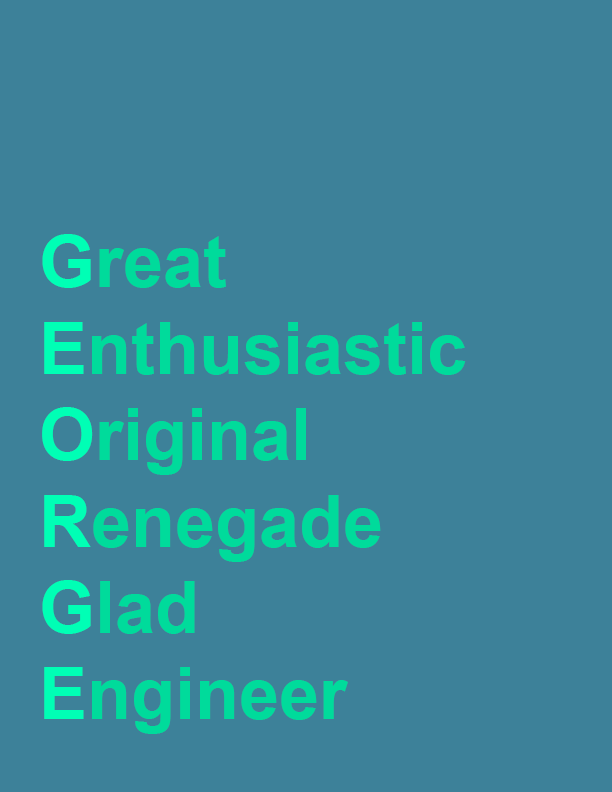
<style>
.page{position:relative;width:612px;height:792px;background:#3d8199}
.page>*{position:absolute;margin:0}
.t1{font:72px "Arial-BoldMT";color:#00db9b}
.t2{font:72px "Arial-BoldMT";color:#00ffb5}
</style>
<div class="page">
<p class="t1" style="left:42px;top:234px;width:424px;height:500px"><span class="t2">G</span>reat<br><span class="t2">E</span>nthusiastic<br><span class="t2">O</span>riginal<br><span class="t2">R</span>enegade<br><span class="t2">G</span>lad<br><span class="t2">E</span>ngineer</p>
</div>
